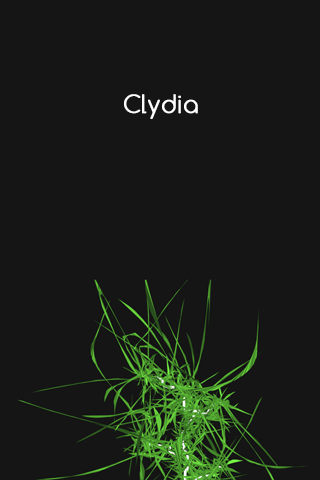
<style>
.page{position:relative;width:320px;height:480px;background:#151515}
.page>*{position:absolute;margin:0}
.t1{font:24px "Comfortaa-Light";color:#ffffff;font-weight:bold}
</style>
<div class="page">
<p class="t1" style="left:124px;top:94px;width:74px;height:25px">Clydia</p>
</div>
